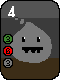
<style>
.page{position:relative;width:60px;height:80px;background:#797979}
.page>*{position:absolute;margin:0}
.t1{font:12px "HeadlineR-HM";color:#ffffff}
.t2{font:8px "KoPubWorldDotumLight";color:#000000}
</style>
<div class="page">
<p class="t1" style="left:8px;top:6px;width:7px;height:11px">4</p>
<p class="t2" style="left:6px;top:36px;width:4px;height:6px">3</p>
<p class="t2" style="left:6px;top:48px;width:4px;height:6px">6</p>
<p class="t2" style="left:6px;top:60px;width:4px;height:6px">3</p>
</div>
